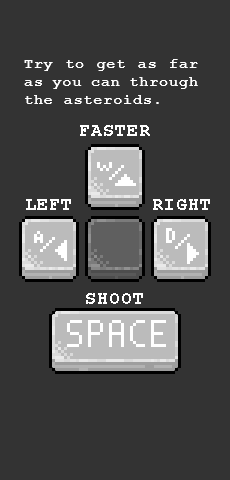
<style>
.page{position:relative;width:230px;height:480px;background:#333333}
.page>*{position:absolute;margin:0}
.t1{font:15.2px "CourierNewPS-BoldMT";letter-spacing:0.051em;color:#ffffff}
.t2{font:18.9px "CourierNewPS-BoldMT";letter-spacing:0.051em;color:#ffffff}
</style>
<div class="page">
<p class="t1" style="left:24px;top:59px;width:174px;height:45px;text-align:justify">Try to get as far as you can through the asteroids.</p>
<p class="t2" style="left:80px;top:125px;width:70px;height:11px">FASTER</p>
<p class="t2" style="left:26px;top:199px;width:45px;height:11px">LEFT</p>
<p class="t2" style="left:153px;top:199px;width:57px;height:11px">RIGHT</p>
<p class="t2" style="left:86px;top:293px;width:57px;height:11px">SHOOT</p>
</div>
